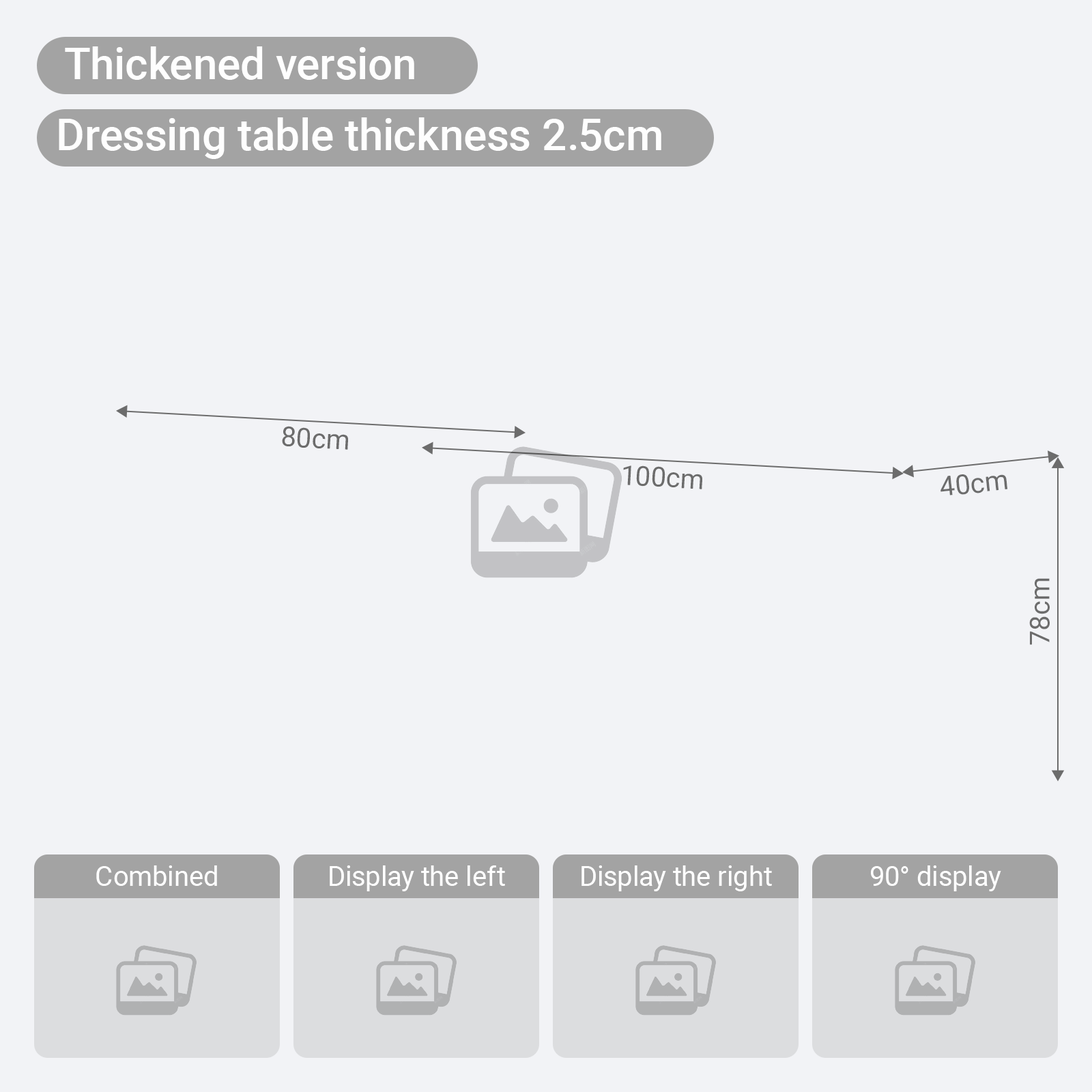
<style>
.page{position:relative;width:1092px;height:1092px;background:#f2f3f6}
.page>*{position:absolute;margin:0}
.t1{font:43.7px "Roboto-Medium";color:#fefefe}
.t2{font:27.3px "Roboto-Regular";color:#6c6c6c}
.t3{font:27.3px "Roboto-Regular";color:#ffffff}
</style>
<div class="page">
<p class="t1" style="left:65px;top:46px;width:349px;height:34px">Thickened version</p>
<p class="t1" style="left:59px;top:117px;width:602px;height:42px">Dressing table thickness 2.5cm</p>
<p class="t2" style="left:282px;top:426px;width:66px;height:24px;rotate:3deg">80cm</p>
<p class="t2" style="left:623px;top:465px;width:79px;height:24px;rotate:3deg">100cm</p>
<p class="t2" style="left:940px;top:474px;width:67px;height:21px;rotate:-6deg">40cm</p>
<p class="t2" style="left:1029px;top:578px;width:21px;height:67px;rotate:-90deg">78cm</p>
<p class="t3" style="left:96px;top:865px;width:121px;height:21px">Combined</p>
<p class="t3" style="left:330px;top:865px;width:175px;height:26px">Display the left</p>
<p class="t3" style="left:581px;top:865px;width:191px;height:26px">Display the right</p>
<p class="t3" style="left:871px;top:865px;width:130px;height:26px">90° display</p>
</div>
